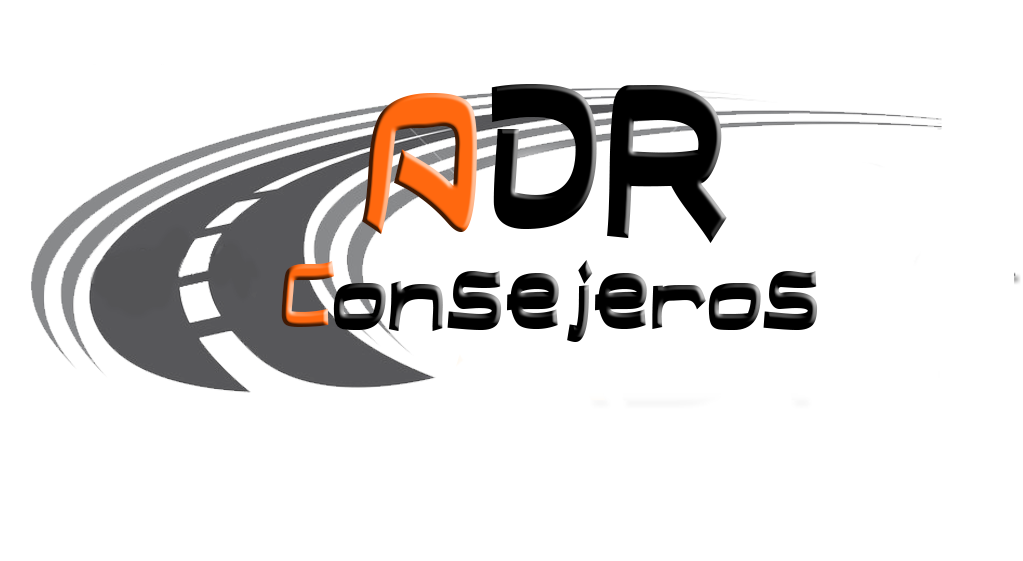
<style>
.page{position:relative;width:1023px;height:561px;background:#ffffff}
.page>*{position:absolute;margin:0}
.t1{font:240px "FieldDayFilter";color:#000000}
.t2{font:240px "FieldDayFilter";color:#ff680f}
.t3{font:110px "FieldDayFilter";color:#000000}
.t4{font:110px "FieldDayFilter";color:#ff680f}
</style>
<div class="page">
<p class="t1" style="left:362px;top:84px;width:365px;height:159px"><span class="t2">A</span>DR</p>
<p class="t3" style="left:281px;top:260px;width:537px;height:82px"><span class="t4">C</span>onsejeros</p>
</div>
